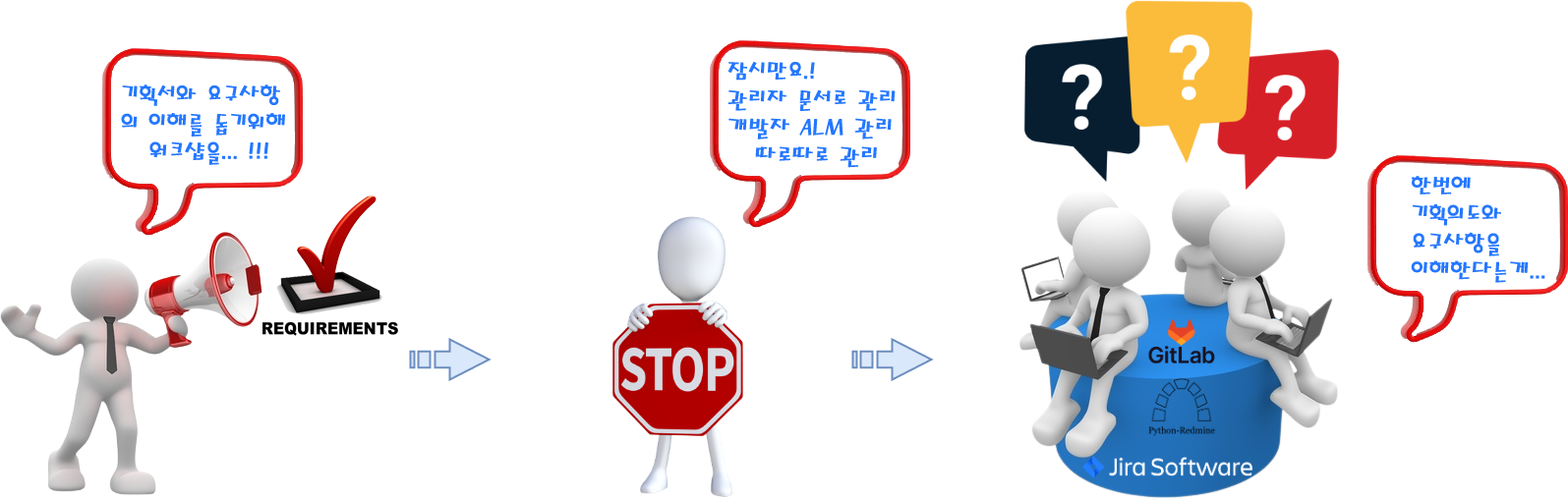
<style>
.page{position:relative;width:1568px;height:499px;background:#ffffff}
.page>*{position:absolute;margin:0}
.t1{font:23.6px "MagicR-HM";color:#2477ff}
</style>
<div class="page">
<p class="t1" style="left:727px;top:61px;width:169px;height:107px">잠시만요.!<br>관리자 문서로 관리<br>개발자 ALM 관리<br>   따로따로 관리</p>
<p class="t1" style="left:121px;top:85px;width:164px;height:80px">기획서와 요구사항<br>의 이해를 돕기위해<br>   워크샵을... !!!</p>
<p class="t1" style="left:1411px;top:176px;width:134px;height:107px">한번에 <br>기획의도와 요구사항을 이해한다는게...</p>
</div>
